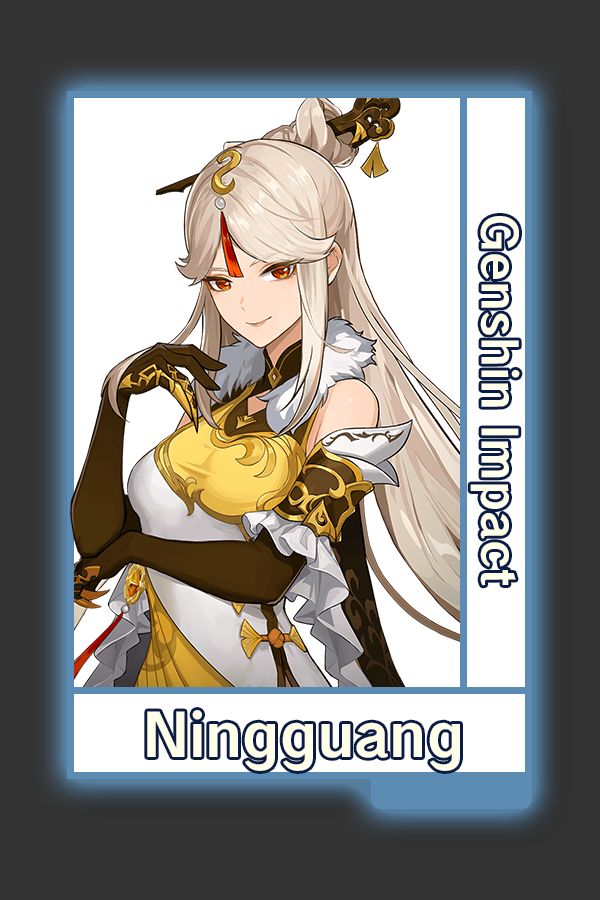
<style>
.page{position:relative;width:600px;height:900px;background:#333333}
.page>*{position:absolute;margin:0}
.t1{font:48.8px "HYWenHei-HEW";color:#fefef4}
.t2{font:60.3px "HYWenHei-HEW";color:#fefef4}
</style>
<div class="page">
<p class="t1" style="left:470px;top:216px;width:50px;height:370px;rotate:90deg">Genshin Impact</p>
<p class="t2" style="left:147px;top:710px;width:313px;height:61px">Ningguang</p>
</div>
